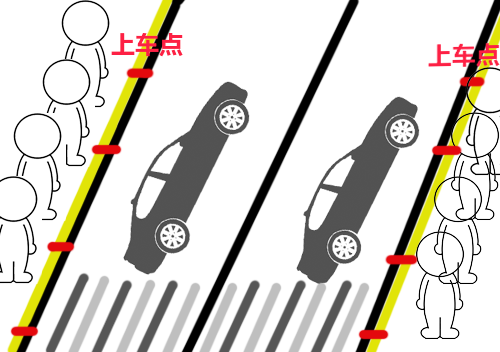
<style>
.page{position:relative;width:500px;height:352px;background:#ffffff}
.page>*{position:absolute;margin:0}
.t1{font:24px "MicrosoftYaHeiUI-Bold";color:#fd2044}
</style>
<div class="page">
<p class="t1" style="left:111px;top:33px;width:72px;height:24px">上车点</p>
</div>
